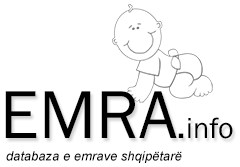
<style>
.page{position:relative;width:240px;height:167px;background:#ffffff}
.page>*{position:absolute;margin:0}
.t1{font:70.2px "FranklinGothic-Book";color:#000000}
.t2{font:40.1px "FranklinGothic-Book";color:#000000}
.t3{font:30.1px "FranklinGothic-Book";color:#000000}
.t4{font:13px "Arial-ItalicMT";color:#000000}
</style>
<div class="page">
<p class="t1" style="left:5px;top:91px;width:228px;height:48px">EMRA<span class="t2">.</span><span class="t3">info</span></p>
<p class="t4" style="left:6px;top:151px;width:176px;height:12px">databaza e emrave shqipëtarë</p>
</div>
